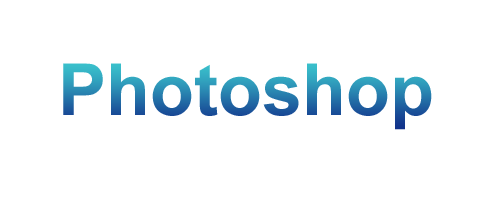
<style>
.page{position:relative;width:500px;height:200px;background:#ffffff}
.page>*{position:absolute;margin:0}
.t1{font:72px "Arial-BoldMT"}
</style>
<div class="page">
<p class="t1" style="left:63px;top:63px;width:369px;height:67px">Photoshop</p>
</div>
